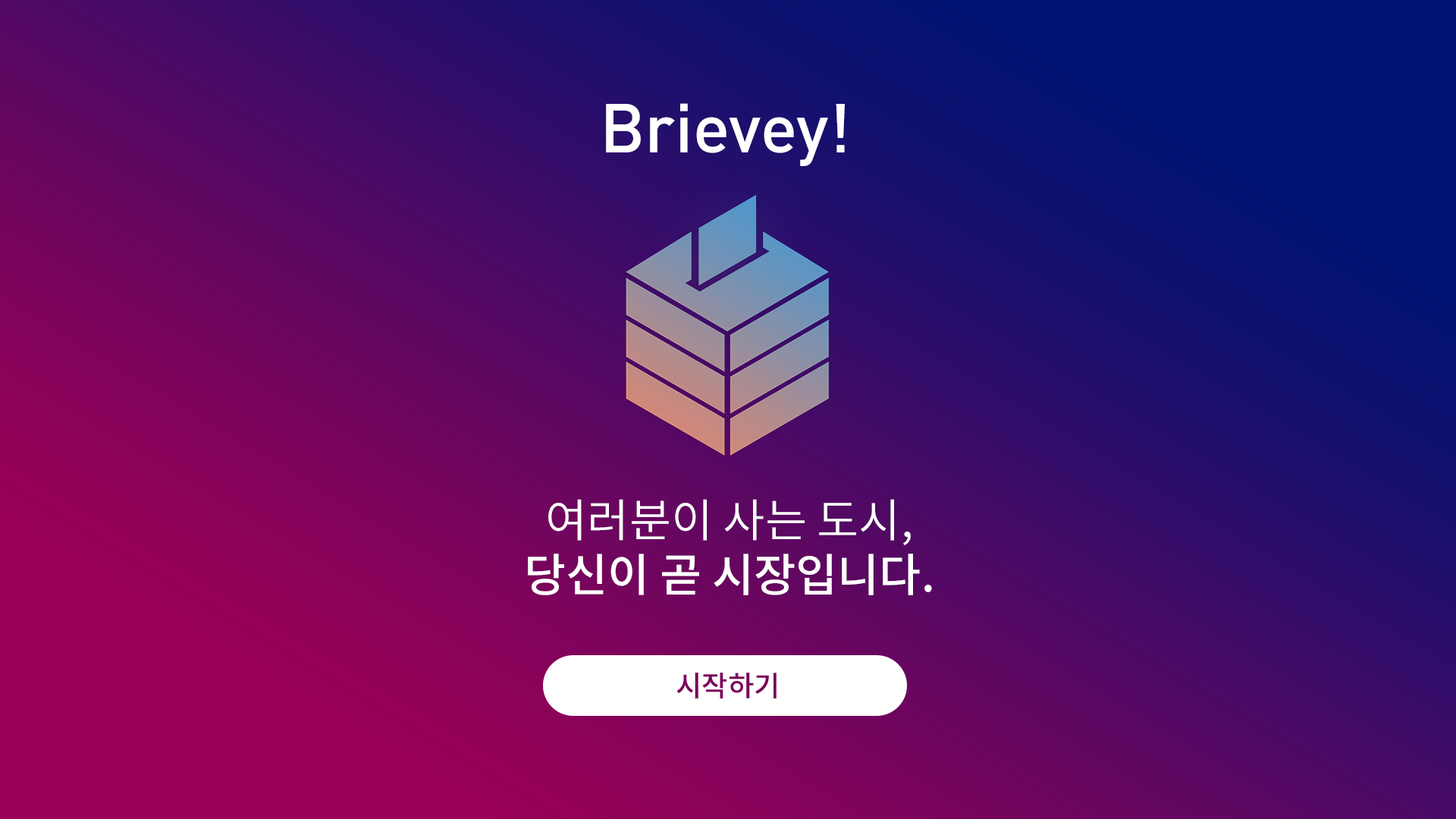
<style>
.page{position:relative;width:1456px;height:819px}
.page>*{position:absolute;margin:0}
.t1{font:68.2px "DIN-Medium";color:#ffffff}
.t2{font:45.5px "NotoSansCJKkr-Medium";color:#ffffff}
.t3{font:45.5px "NotoSansCJKkr-DemiLight";color:#ffffff}
</style>
<div class="page">
<p class="t1" style="left:606px;top:103px;width:239px;height:63px">Brievey!</p>
<p class="t2" style="left:528px;top:499px;width:404px;height:96px;text-align:center"><span class="t3">여러분이 사는 도시,<br></span>당신이 곧 시장입니다.</p>
</div>
